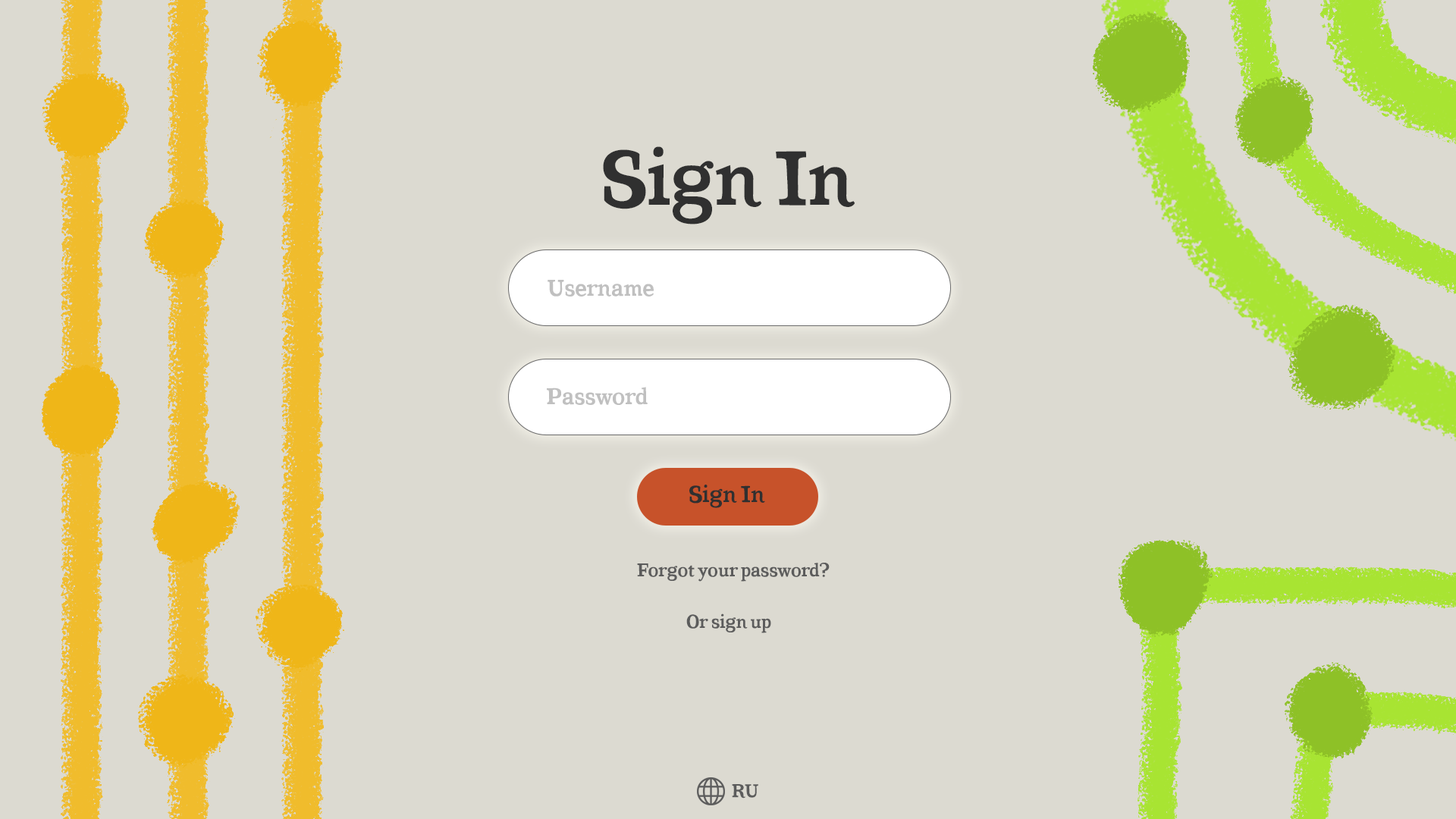
<style>
.page{position:relative;width:1456px;height:819px;background:#dcdad1}
.page>*{position:absolute;margin:0}
.t1{font:75.8px "CoatsBold-Bold";color:#303030}
.t2{font:22.7px "CoatsBold-Bold";color:#c0c0c0}
.t3{font:22.7px "CoatsBold-Bold";color:#303030}
.t4{font:18.2px "CoatsBold-Bold";color:#5c5c5c}
</style>
<div class="page">
<p class="t1" style="left:603px;top:146px;width:252px;height:78px">Sign In</p>
<p class="t2" style="left:548px;top:280px;width:106px;height:17px">Username</p>
<p class="t2" style="left:547px;top:387px;width:101px;height:18px">Password</p>
<p class="t3" style="left:689px;top:485px;width:76px;height:23px">Sign In</p>
<p class="t4" style="left:637px;top:563px;width:193px;height:19px">Forgot your password?</p>
<p class="t4" style="left:686px;top:613px;width:85px;height:20px">Or sign up</p>
<p class="t4" style="left:732px;top:784px;width:26px;height:15px">RU</p>
</div>
